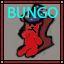
<style>
.page{position:relative;width:64px;height:64px;background:#8e8b86}
.page>*{position:absolute;margin:0}
.t1{font:16px "MyriadPro-Regular";color:#00fff6}
</style>
<div class="page">
<p class="t1" style="left:8px;top:7px;width:50px;height:11px">BUNGO</p>
</div>
